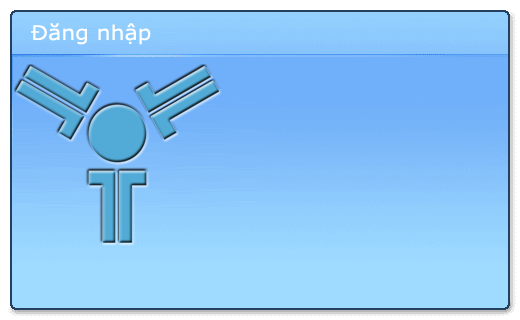
<style>
.page{position:relative;width:520px;height:320px}
.page>*{position:absolute;margin:0}
.t1{font:20.2px "Verdana";color:#ffffff;scale:1.09 1}
</style>
<div class="page">
<p class="t1" style="left:31px;top:23px;width:120px;height:22px">Đăng nhập</p>
</div>
